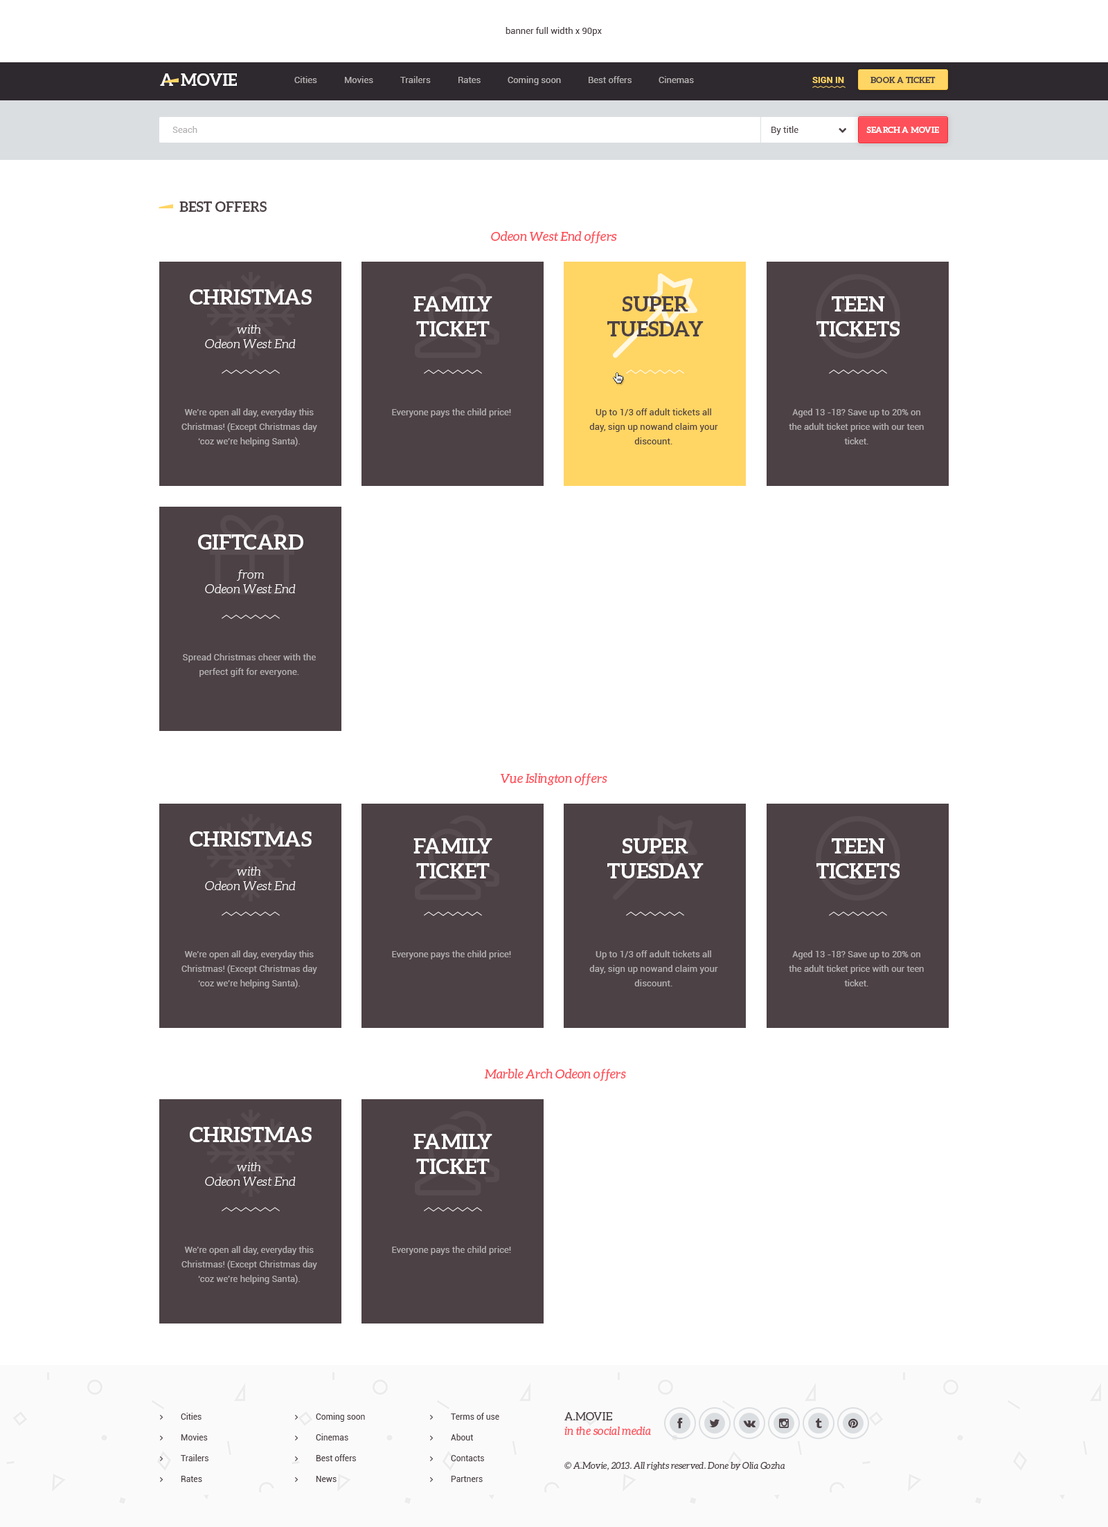
<style>
.page{position:relative;width:1108px;height:1527px;background:#ffffff}
.page>*{position:absolute;margin:0}
.t1{font:9px "Roboto-Regular";color:#4c4145}
.t2{font:16.6px "Aleo-Bold";color:#ffffff;text-transform:uppercase}
.t3{font:9px "Roboto-Regular";color:#b4b1b2}
.t4{font:9px "Roboto-Bold";color:#ffd564;text-transform:uppercase}
.t5{font:8.3px "Aleo-Bold";color:#4c4145;text-transform:uppercase}
.t6{font:8.3px "Aleo-Bold";color:#ffffff;text-transform:uppercase}
.t7{font:13.8px "Aleo-Bold";color:#4c4145;text-transform:uppercase}
.t8{font:12.5px "Aleo-Italic";color:#fe505a}
.t9{font:12.5px/14.5px "Aleo-LightItalic";color:#ffffff}
.t10{font:20.8px/14.5px "Aleo-Bold";color:#ffffff;text-transform:uppercase}
.t11{font:20.8px "Aleo-Bold";color:#ffffff;text-transform:uppercase}
.t12{font:20.8px "Aleo-Bold";color:#4c4145;text-transform:uppercase}
.t13{font:9px/14.5px "Roboto-Regular";color:#b4b1b2}
.t14{font:9px/14.5px "Roboto-Regular";color:#4c4145}
.t15{font:8.3px "Roboto-Regular";color:#4c4145}
.t16{font:11.1px/14.5px "Aleo-Italic";color:#fe505a}
.t17{font:11.1px/14.5px "Aleo-Regular";color:#4c4145;text-transform:uppercase}
.t18{font:9px "Aleo-Italic";color:#4c4145}
</style>
<div class="page">
<p class="t1" style="left:505px;top:27px;width:97px;height:9px">banner full width x 90px</p>
<p class="t2" style="left:160px;top:73px;width:13px;height:13px">A</p>
<p class="t2" style="left:181px;top:73px;width:56px;height:13px">movie</p>
<p class="t3" style="left:294px;top:76px;width:23px;height:7px">Cities</p>
<p class="t3" style="left:345px;top:76px;width:28px;height:7px">Movies</p>
<p class="t3" style="left:400px;top:76px;width:31px;height:7px">Trailers</p>
<p class="t3" style="left:458px;top:77px;width:22px;height:6px">Rates</p>
<p class="t3" style="left:507px;top:76px;width:54px;height:9px">Coming soon</p>
<p class="t3" style="left:588px;top:76px;width:43px;height:7px">Best offers</p>
<p class="t3" style="left:658px;top:76px;width:36px;height:7px">Cinemas</p>
<p class="t4" style="left:812px;top:77px;width:32px;height:6px">Sign in</p>
<p class="t5" style="left:870px;top:77px;width:65px;height:6px">Book a ticket</p>
<p class="t3" style="left:172px;top:126px;width:25px;height:7px">Seach</p>
<p class="t1" style="left:771px;top:126px;width:27px;height:9px">By title</p>
<p class="t6" style="left:866px;top:127px;width:73px;height:6px">search a movie</p>
<p class="t7" style="left:179px;top:201px;width:88px;height:11px">Best offers</p>
<p class="t8" style="left:491px;top:231px;width:126px;height:13px">Odeon West End offers</p>
<p class="t9" style="left:190px;top:289px;width:122px;height:60px;text-align:center"><span class="t10">Christmas<br></span><br>with <br>Odeon West End</p>
<p class="t11" style="left:413px;top:296px;width:79px;height:40px;text-align:center">family<br>ticket</p>
<p class="t12" style="left:607px;top:296px;width:96px;height:40px;text-align:center">super<br>tuesday</p>
<p class="t11" style="left:816px;top:296px;width:83px;height:40px;text-align:center">teen<br>tickets</p>
<p class="t13" style="left:181px;top:408px;width:136px;height:39px;text-align:center">We’re open all day, everyday this Christmas! (Except Christmas day ‘coz we’re helping Santa).</p>
<p class="t3" style="left:392px;top:408px;width:119px;height:9px">Everyone pays the child price!</p>
<p class="t14" style="left:589px;top:408px;width:129px;height:36px;text-align:center">Up to 1/3 off adult tickets all day, sign up nowand claim your discount.</p>
<p class="t13" style="left:789px;top:408px;width:135px;height:36px;text-align:center">Aged 13 -18? Save up to 20% on the adult ticket price with our teen ticket.</p>
<p class="t9" style="left:198px;top:534px;width:105px;height:60px;text-align:center"><span class="t10">giftcard<br></span><br>from<br>Odeon West End</p>
<p class="t13" style="left:183px;top:654px;width:133px;height:23px;text-align:center">Spread Christmas cheer with the perfect gift for everyone.</p>
<p class="t8" style="left:501px;top:773px;width:106px;height:13px">Vue Islington offers</p>
<p class="t9" style="left:190px;top:831px;width:122px;height:60px;text-align:center"><span class="t10">Christmas<br></span><br>with <br>Odeon West End</p>
<p class="t11" style="left:413px;top:838px;width:79px;height:41px;text-align:center">family<br>ticket</p>
<p class="t11" style="left:607px;top:838px;width:96px;height:41px;text-align:center">super<br>tuesday</p>
<p class="t11" style="left:816px;top:838px;width:83px;height:41px;text-align:center">teen<br>tickets</p>
<p class="t13" style="left:181px;top:951px;width:136px;height:38px;text-align:center">We’re open all day, everyday this Christmas! (Except Christmas day ‘coz we’re helping Santa).</p>
<p class="t3" style="left:392px;top:951px;width:119px;height:9px">Everyone pays the child price!</p>
<p class="t13" style="left:589px;top:951px;width:129px;height:36px;text-align:center">Up to 1/3 off adult tickets all day, sign up nowand claim your discount.</p>
<p class="t13" style="left:789px;top:951px;width:135px;height:36px;text-align:center">Aged 13 -18? Save up to 20% on the adult ticket price with our teen ticket.</p>
<p class="t8" style="left:484px;top:1069px;width:142px;height:12px">Marble Arch Odeon offers</p>
<p class="t9" style="left:190px;top:1127px;width:122px;height:60px;text-align:center"><span class="t10">Christmas<br></span><br>with <br>Odeon West End</p>
<p class="t11" style="left:413px;top:1134px;width:79px;height:40px;text-align:center">family<br>ticket</p>
<p class="t13" style="left:181px;top:1246px;width:136px;height:38px;text-align:center">We’re open all day, everyday this Christmas! (Except Christmas day ‘coz we’re helping Santa).</p>
<p class="t3" style="left:392px;top:1246px;width:119px;height:9px">Everyone pays the child price!</p>
<p class="t15" style="left:181px;top:1413px;width:20px;height:7px">Cities</p>
<p class="t15" style="left:316px;top:1413px;width:49px;height:9px">Coming soon</p>
<p class="t15" style="left:451px;top:1413px;width:48px;height:7px">Terms of use</p>
<p class="t16" style="left:564px;top:1412px;width:87px;height:24px"><span class="t17">A.Movie <br></span>in the social media</p>
<p class="t15" style="left:181px;top:1434px;width:27px;height:7px">Movies</p>
<p class="t15" style="left:316px;top:1434px;width:32px;height:7px">Cinemas</p>
<p class="t15" style="left:451px;top:1434px;width:23px;height:7px">About</p>
<p class="t15" style="left:181px;top:1455px;width:27px;height:6px">Trailers</p>
<p class="t15" style="left:316px;top:1455px;width:40px;height:6px">Best offers</p>
<p class="t15" style="left:451px;top:1455px;width:33px;height:6px">Contacts</p>
<p class="t18" style="left:564px;top:1462px;width:221px;height:8px">© A.Movie, 2013. All rights reserved. Done by Olia Gozha</p>
<p class="t15" style="left:181px;top:1476px;width:21px;height:6px">Rates</p>
<p class="t15" style="left:316px;top:1476px;width:20px;height:6px">News</p>
<p class="t15" style="left:451px;top:1476px;width:32px;height:6px">Partners</p>
</div>
